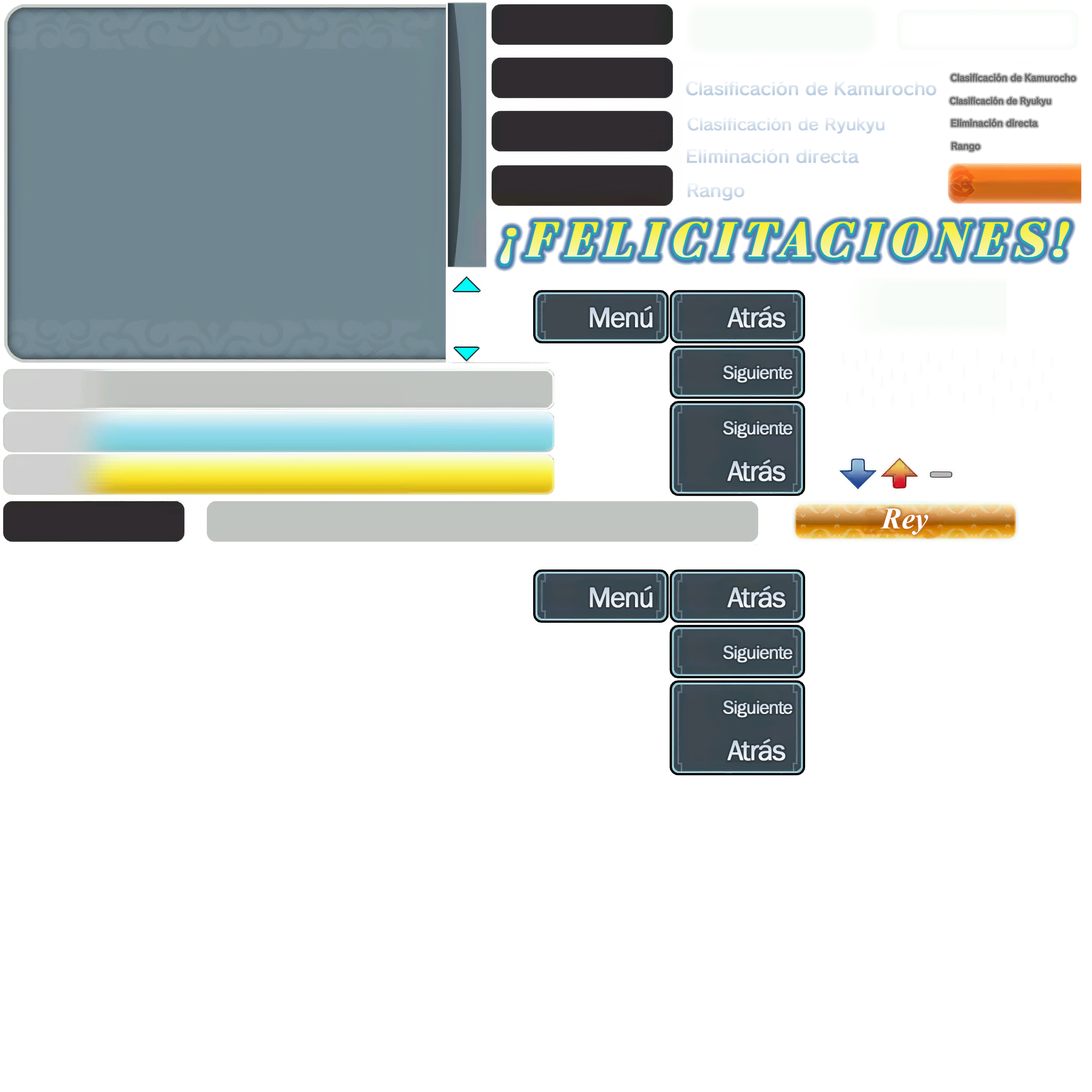
<style>
.page{position:relative;width:1092px;height:1092px;background:#ffffff}
.page>*{position:absolute;margin:0}
.t1{font:8.7px "SCEPS3RodinLATIN-Regular";letter-spacing:-0.02em;color:#6b6b6b;font-weight:bold}
.t2{font:17.4px "SCEPS3RodinLATIN-Regular";letter-spacing:-0.02em;color:#cad8e7;font-weight:bold;scale:1.03 1}
.t3{font:8.2px "SCEPS3RodinLATIN-Regular";letter-spacing:-0.02em;color:#6c6c6c;font-weight:bold}
.t4{font:16px "SCEPS3RodinLATIN-Regular";letter-spacing:-0.02em;color:#d0ddea;font-weight:bold;scale:1.04 1}
.t5{font:8.7px "SCEPS3RodinLATIN-Regular";letter-spacing:-0.02em;color:#6b6b6b;font-weight:bold;scale:1.04 1}
.t6{font:17.4px "SCEPS3RodinLATIN-Regular";letter-spacing:-0.02em;color:#ccdae8;font-weight:bold;scale:1.04 1}
.t7{font:17.4px "SCEPS3RodinLATIN-Regular";letter-spacing:-0.02em;color:#d2deea;font-weight:bold;scale:1.04 1}
.t8{font:50.1px "BodoniFLF-BoldItalic";letter-spacing:0.16em;font-weight:bold}
.t9{font:29.1px "FranklinGothic-Book";letter-spacing:-0.06em;color:#e0e7f0;font-weight:bold}
.t10{font:29.1px "FranklinGothic-Book";letter-spacing:-0.06em;color:#e2e8f1;font-weight:bold}
.t11{font:19px "FranklinGothic-Book";letter-spacing:-0.06em;color:#dbe2ee;font-weight:bold}
.t12{font:30px "TimesNewRomanPS-BoldItalicMT";color:#ffffff}
</style>
<div class="page">
<p class="t1" style="left:951px;top:74px;width:125px;height:8px">Clasificación de Kamurocho</p>
<p class="t2" style="left:686px;top:81px;width:250px;height:14px">Clasificación de Kamurocho</p>
<p class="t3" style="left:950px;top:97px;width:101px;height:9px">Clasificación de Ryukyu</p>
<p class="t4" style="left:687px;top:117px;width:198px;height:17px">Clasificación de Ryukyu</p>
<p class="t5" style="left:951px;top:119px;width:87px;height:8px">Eliminación directa</p>
<p class="t6" style="left:687px;top:148px;width:172px;height:15px">Eliminación directa</p>
<p class="t5" style="left:952px;top:142px;width:28px;height:9px">Rango</p>
<p class="t7" style="left:687px;top:183px;width:57px;height:18px">Rango</p>
<p class="t8" style="left:500px;top:221px;width:569px;height:43px">¡FELICITACIONES!</p>
<p class="t8" style="left:500px;top:222px;width:569px;height:43px">¡FELICITACIONES!</p>
<p class="t9" style="left:590px;top:306px;width:63px;height:22px">Menú</p>
<p class="t10" style="left:727px;top:306px;width:58px;height:22px">Atrás</p>
<p class="t11" style="left:723px;top:365px;width:69px;height:18px">Siguiente</p>
<p class="t11" style="left:723px;top:421px;width:69px;height:17px">Siguiente</p>
<p class="t10" style="left:727px;top:459px;width:58px;height:22px">Atrás</p>
<p class="t12" style="left:880px;top:508px;width:48px;height:27px">Rey</p>
<p class="t9" style="left:590px;top:585px;width:63px;height:23px">Menú</p>
<p class="t10" style="left:727px;top:585px;width:58px;height:23px">Atrás</p>
<p class="t11" style="left:723px;top:645px;width:69px;height:18px">Siguiente</p>
<p class="t11" style="left:723px;top:700px;width:69px;height:18px">Siguiente</p>
<p class="t10" style="left:727px;top:738px;width:58px;height:23px">Atrás</p>
</div>
